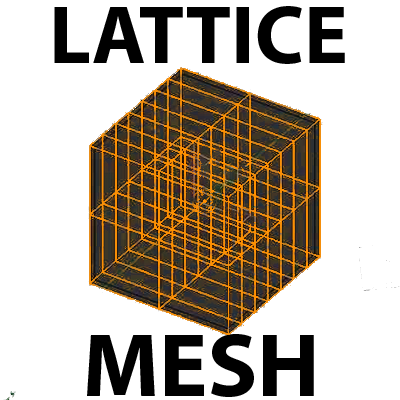
<style>
.page{position:relative;width:400px;height:400px;background:#ffffff}
.page>*{position:absolute;margin:0}
.t1{font:82.4px "MyriadPro-Bold";color:#000000}
.t2{font:91.1px "MyriadPro-Bold";color:#000000}
</style>
<div class="page">
<p class="t1" style="left:54px;top:6px;width:291px;height:58px">LATTICE</p>
<p class="t2" style="left:87px;top:334px;width:227px;height:63px">MESH</p>
</div>
